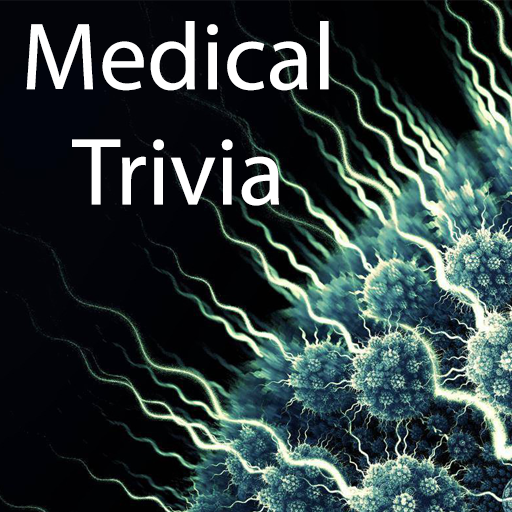
<style>
.page{position:relative;width:512px;height:512px}
.page>*{position:absolute;margin:0}
.t1{font:96px "MyriadPro-Regular";color:#ffffff}
</style>
<div class="page">
<p class="t1" style="left:26px;top:21px;width:303px;height:185px;text-align:center">Medical Trivia</p>
</div>
